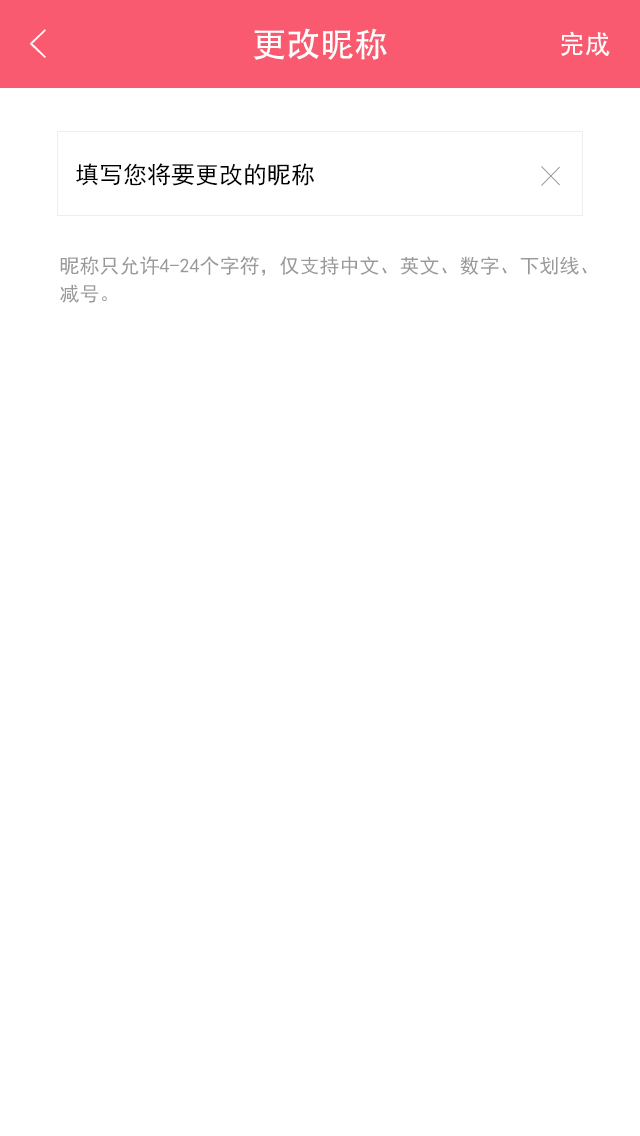
<style>
.page{position:relative;width:640px;height:1136px;background:#ffffff}
.page>*{position:absolute;margin:0}
.t1{font:40px "FZYXJW--GB1-0";color:#ffffff}
.t2{font:34px "AdobeHeitiStd-Regular";color:#ffffff}
.t3{font:26px "AdobeHeitiStd-Regular";color:#ffffff}
.t4{font:24px "SimHei";color:#000000}
.t5{font:20px/28px "SimHei";color:#999999}
</style>
<div class="page">
<p class="t1" style="left:29px;top:29px;width:17px;height:29px">&lt;</p>
<p class="t2" style="left:253px;top:28px;width:134px;height:32px">更改昵称</p>
<p class="t3" style="left:561px;top:31px;width:49px;height:25px">完成</p>
<p class="t4" style="left:76px;top:163px;width:238px;height:23px">填写您将要更改的昵称</p>
<p class="t5" style="left:60px;top:256px;width:527px;height:47px">昵称只允许4-24个字符，仅支持中文、英文、数字、下划线、<br>减号。</p>
</div>
